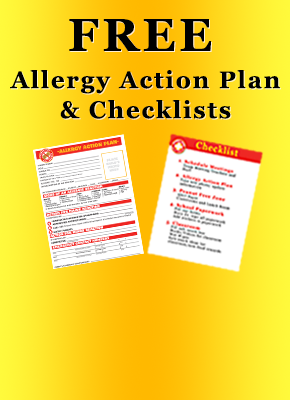
<style>
.page{position:relative;width:290px;height:400px}
.page>*{position:absolute;margin:0}
.t1{font:46px "Georgia-Bold";letter-spacing:0.075em;color:#000000}
.t2{font:24px/30px "Georgia-Bold";letter-spacing:0.075em;color:#000000}
.t3{font:24px/30px "Georgia-Bold";letter-spacing:0.075em}
</style>
<div class="page">
<p class="t1" style="left:69px;top:19px;width:143px;height:32px">FREE</p>
<p class="t1" style="left:70px;top:20px;width:143px;height:32px">FREE</p>
<p class="t2" style="left:10px;top:70px;width:270px;height:49px;text-align:center">Allergy Action Plan <br>&amp; Checklists</p>
<p class="t3" style="left:11px;top:71px;width:270px;height:49px;text-align:center">Allergy Action Plan <br>&amp; Checklists</p>
</div>
